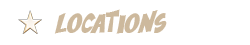
<style>
.page{position:relative;width:250px;height:45px;background:#ffffff}
.page>*{position:absolute;margin:0}
.t1{font:30px "HoustonComicsPersonalUse";color:#cdb99d}
</style>
<div class="page">
<p class="t1" style="left:54px;top:9px;width:113px;height:25px">LOCATIONS</p>
</div>
